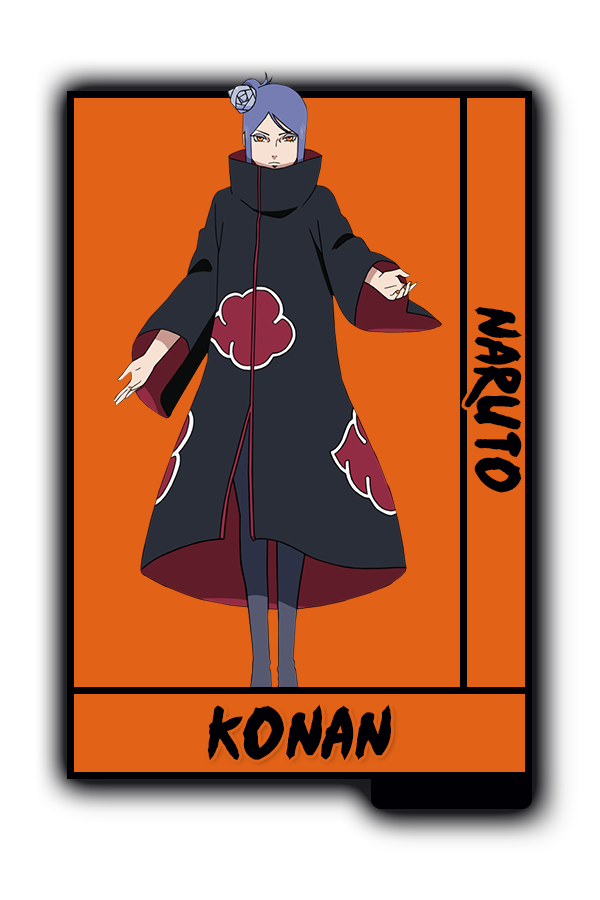
<style>
.page{position:relative;width:600px;height:900px;background:#e26317}
.page>*{position:absolute;margin:0}
.t1{font:52px "Ninja-Naruto";color:#010005}
.t2{font:60.3px "Ninja-Naruto";color:#010005}
</style>
<div class="page">
<p class="t1" style="left:464px;top:307px;width:59px;height:186px;rotate:90deg">Naruto</p>
<p class="t2" style="left:207px;top:704px;width:184px;height:57px">Konan</p>
</div>
